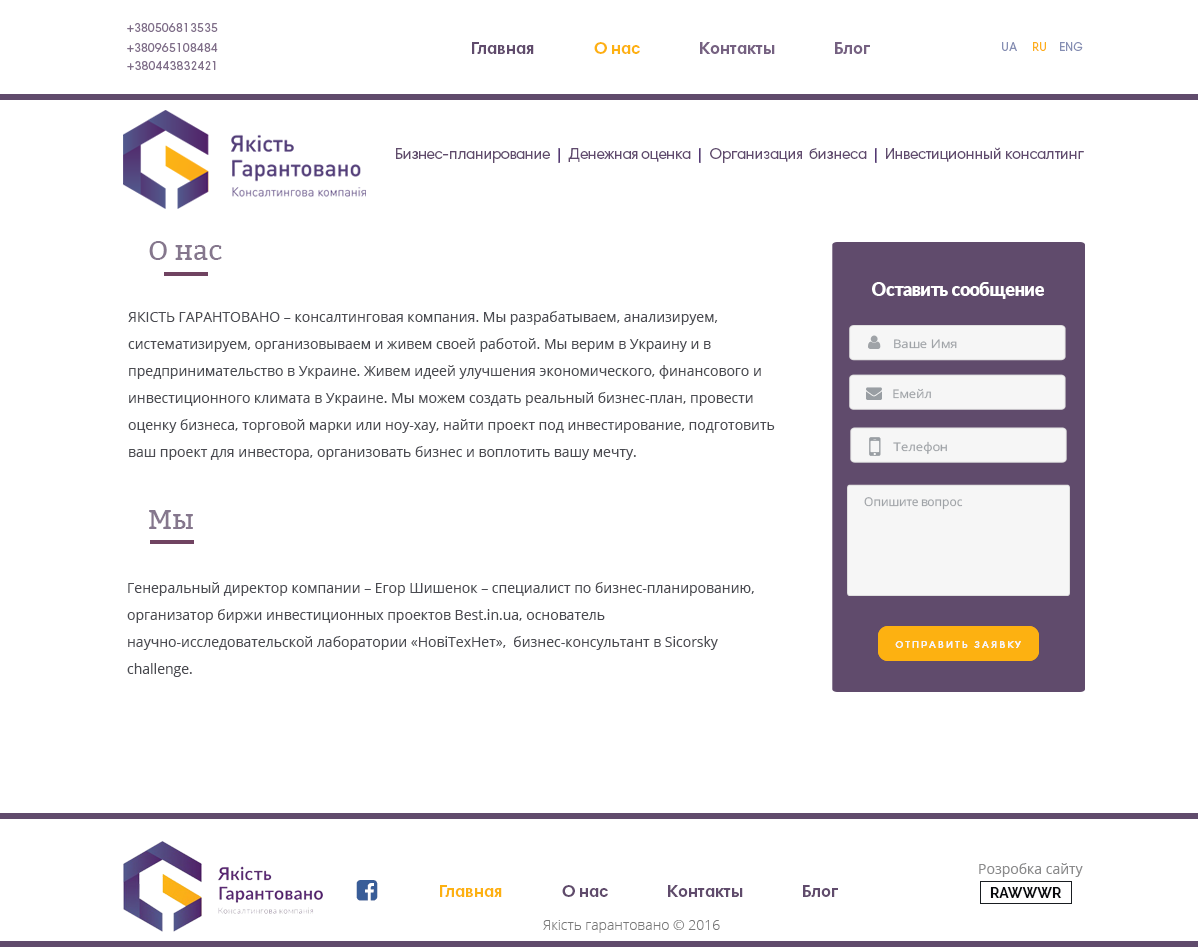
<style>
.page{position:relative;width:1200px;height:947px;background:#ffffff}
.page>*{position:absolute;margin:0}
.t1{font:12px "HarmoniaSansProCyr-Regular";color:#806f89}
.t2{font:17px "HarmoniaSansProCyr-Bold";color:#604b6c}
.t3{font:17px "HarmoniaSansProCyr-Bold";color:#fdb111}
.t4{font:12px "HarmoniaSansProCyr-Regular";color:#858eb3}
.t5{font:12px "HarmoniaSansProCyr-Regular";color:#fdaf19}
.t6{font:15.3px "HarmoniaSansProCyr-Regular";letter-spacing:-0.025em;color:#604b6c}
.t7{font:15.3px "HarmoniaSansProCyr-Bold";color:#533774}
.t8{font:15.3px "HarmoniaSansProCyr-Regular";letter-spacing:-0.017em;color:#604a6e}
.t9{font:27px "Bitter-Regular";color:#85778d}
.t10{font:18px "Lato-Black";letter-spacing:-0.025em;color:#ffffff}
.t11{font:14px/27px "OpenSans";color:#4a4b51}
.t12{font:11.7px "OpenSans";color:#9fa3a7;scale:1.1 1}
.t13{font:12.1px "OpenSans";letter-spacing:-0.025em;color:#9fa3a7}
.t14{font:10px "HarmoniaSansProCyr-Regular";letter-spacing:0.24em;color:#f6f6f6;text-transform:uppercase}
.t15{font:14px "OpenSans";color:#8a8a8b}
.t16{font:14px "Raleway-Bold";color:#07080c}
.t17{font:14px "OpenSans-Light";color:#787878}
</style>
<div class="page">
<p class="t1" style="left:127px;top:23px;width:91px;height:9px">+380506813535</p>
<p class="t1" style="left:127px;top:43px;width:91px;height:9px">+380965108484</p>
<p class="t2" style="left:472px;top:42px;width:62px;height:12px">Главная</p>
<p class="t3" style="left:594px;top:42px;width:46px;height:12px">О нас</p>
<p class="t2" style="left:700px;top:42px;width:75px;height:12px">Контакты</p>
<p class="t2" style="left:835px;top:42px;width:35px;height:12px">Блог</p>
<p class="t4" style="left:1002px;top:42px;width:44px;height:9px">UA    <span class="t5"> RU</span></p>
<p class="t4" style="left:1060px;top:42px;width:23px;height:9px">ENG</p>
<p class="t1" style="left:127px;top:61px;width:89px;height:9px">+380443832421</p>
<p class="t6" style="left:396px;top:148px;width:154px;height:15px">Бизнес-планирование</p>
<p class="t7" style="left:558px;top:148px;width:2px;height:15px">|</p>
<p class="t8" style="left:568px;top:148px;width:123px;height:14px">Денежная оценка</p>
<p class="t7" style="left:699px;top:148px;width:2px;height:15px">|</p>
<p class="t8" style="left:710px;top:148px;width:157px;height:15px">Организация  бизнеса</p>
<p class="t7" style="left:875px;top:148px;width:2px;height:15px">|</p>
<p class="t8" style="left:886px;top:147px;width:198px;height:15px">Инвестиционный консалтинг</p>
<p class="t9" style="left:149px;top:241px;width:73px;height:19px">О нас</p>
<p class="t10" style="left:872px;top:282px;width:172px;height:17px">Оставить сообщение</p>
<p class="t11" style="left:128px;top:311px;width:647px;height:149px">ЯКІСТЬ ГАРАНТОВАНО – консалтинговая компания. Мы разрабатываем, анализируем, систематизируем, организовываем и живем своей работой. Мы верим в Украину и в предпринимательство в Украине. Живем идеей улучшения экономического, финансового и инвестиционного климата в Украине. Мы можем создать реальный бизнес-план, провести оценку бизнеса, торговой марки или ноу-хау, найти проект под инвестирование, подготовить ваш проект для инвестора, организовать бизнес и воплотить вашу мечту.</p>
<p class="t12" style="left:894px;top:339px;width:63px;height:10px">Ваше Имя</p>
<p class="t12" style="left:893px;top:388px;width:38px;height:11px">Емейл</p>
<p class="t12" style="left:893px;top:441px;width:54px;height:13px">Телефон</p>
<p class="t13" style="left:864px;top:497px;width:99px;height:13px">Опишите вопрос</p>
<p class="t9" style="left:149px;top:510px;width:44px;height:19px">Мы</p>
<p class="t11" style="left:127px;top:582px;width:627px;height:95px">Генеральный директор компании – Егор Шишенок – специалист по бизнес-планированию, организатор биржи инвестиционных проектов Best.in.ua, основатель научно-исследовательской лаборатории «НовіТехНет»,  бизнес-консультант в Sicorsky challenge.</p>
<p class="t14" style="left:895px;top:641px;width:126px;height:7px">Отправить Заявку</p>
<p class="t14" style="left:895px;top:641px;width:126px;height:7px">Отправить Заявку</p>
<p class="t15" style="left:979px;top:863px;width:104px;height:14px">Розробка сайту</p>
<p class="t3" style="left:440px;top:885px;width:62px;height:12px">Главная</p>
<p class="t2" style="left:562px;top:885px;width:46px;height:12px">О нас</p>
<p class="t2" style="left:668px;top:885px;width:75px;height:12px">Контакты</p>
<p class="t2" style="left:803px;top:885px;width:35px;height:12px">Блог</p>
<p class="t16" style="left:990px;top:887px;width:72px;height:11px">RAWWWR</p>
<p class="t17" style="left:543px;top:920px;width:177px;height:13px">Якість гарантовано © 2016</p>
</div>
